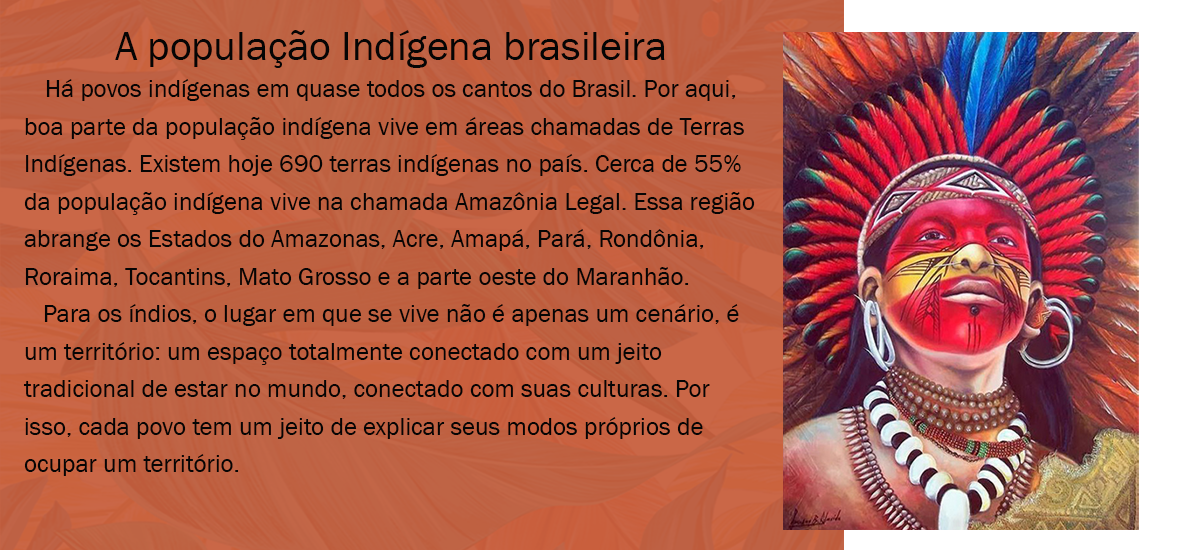
<style>
.page{position:relative;width:1200px;height:550px}
.page>*{position:absolute;margin:0}
.t1{font:25px/37.5px "FranklinGothic-Book";color:#050505}
.t2{font:41.7px/37.5px "FranklinGothic-Book";color:#050505}
</style>
<div class="page">
<p class="t1" style="left:23px;top:30px;width:732px;height:446px;text-align:center"><span class="t2">A população Indígena brasileira<br>  </span> Há povos indígenas em quase todos os cantos do Brasil. Por aqui, boa parte da população indígena vive em áreas chamadas de Terras Indígenas. Existem hoje 690 terras indígenas no país. Cerca de 55% da população indígena vive na chamada Amazônia Legal. Essa região abrange os Estados do Amazonas, Acre, Amapá, Pará, Rondônia, Roraima, Tocantins, Mato Grosso e a parte oeste do Maranhão.<br>   Para os índios, o lugar em que se vive não é apenas um cenário, é um território: um espaço totalmente conectado com um jeito tradicional de estar no mundo, conectado com suas culturas. Por isso, cada povo tem um jeito de explicar seus modos próprios de ocupar um território.</p>
</div>
